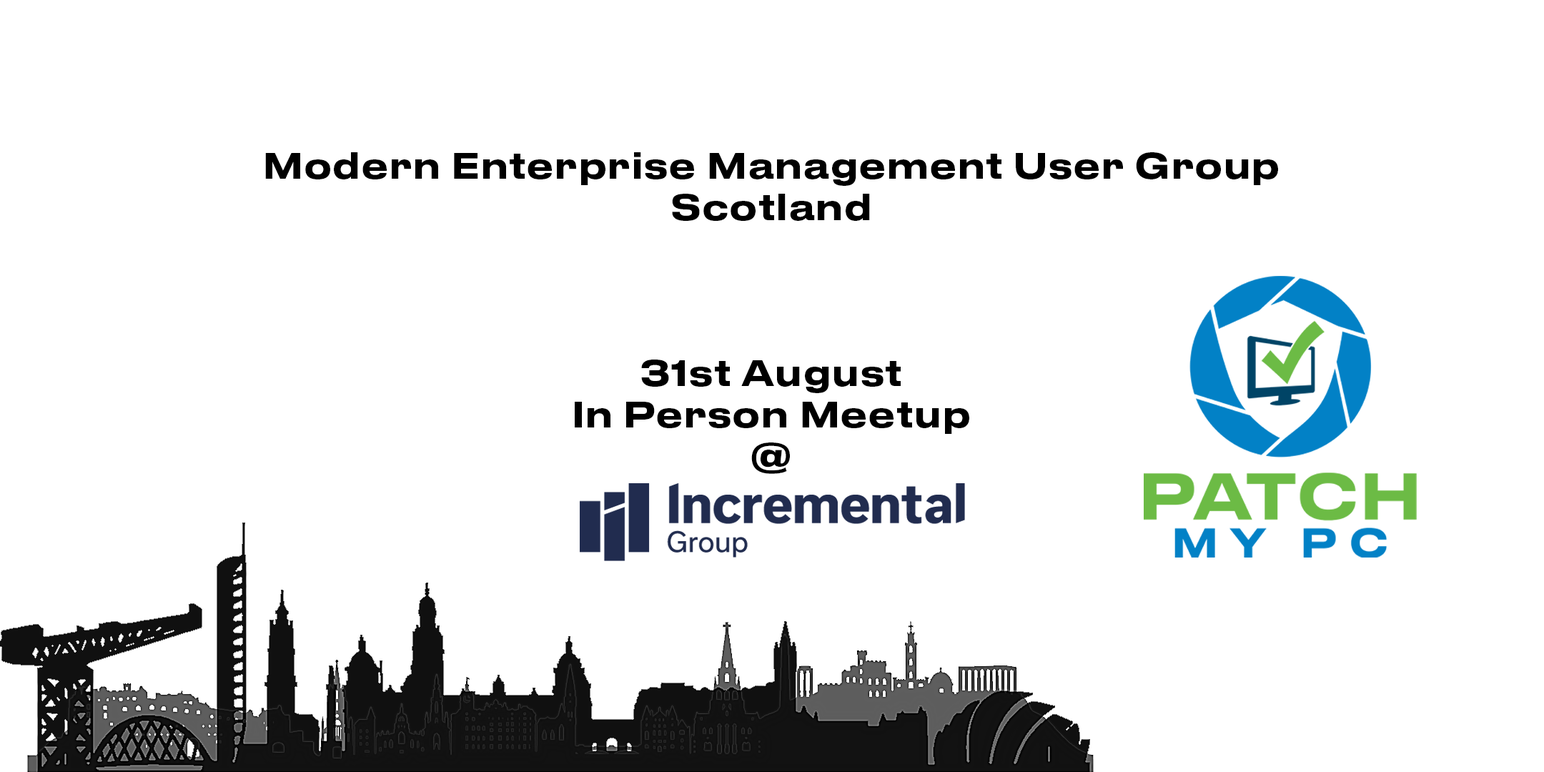
<style>
.page{position:relative;width:1544px;height:772px;background:#ffffff}
.page>*{position:absolute;margin:0}
.t1{font:34.3px "DrukTextWide-Medium";color:#000000}
</style>
<div class="page">
<p class="t1" style="left:265px;top:152px;width:1013px;height:69px;text-align:center">Modern Enterprise Management User Group<br>Scotland</p>
<p class="t1" style="left:575px;top:360px;width:394px;height:114px;text-align:center">31st August<br>In Person Meetup<br>@</p>
</div>
